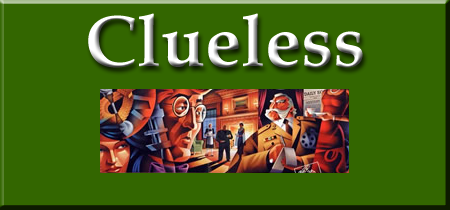
<style>
.page{position:relative;width:450px;height:210px;background:#336600}
.page>*{position:absolute;margin:0}
.t1{font:72px "PalatinoLinotype-Bold"}
</style>
<div class="page">
<p class="t1" style="left:88px;top:13px;width:275px;height:55px">Clueless</p>
</div>
